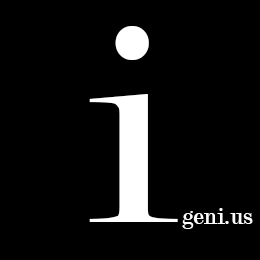
<style>
.page{position:relative;width:260px;height:260px;background:#000000}
.page>*{position:absolute;margin:0}
.t1{font:300px "Modern-Regular";color:#ffffff}
.t2{font:25px "Modern-Regular";color:#ffffff}
</style>
<div class="page">
<p class="t1" style="left:89px;top:26px;width:89px;height:196px">i</p>
<p class="t2" style="left:182px;top:208px;width:71px;height:21px">geni.us</p>
</div>
